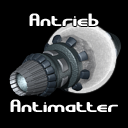
<style>
.page{position:relative;width:128px;height:128px;background:#000000}
.page>*{position:absolute;margin:0}
.t1{font:18px "GravitateBRK";color:#ffffff}
</style>
<div class="page">
<p class="t1" style="left:29px;top:13px;width:70px;height:13px">Antrieb</p>
<p class="t1" style="left:10px;top:99px;width:108px;height:13px">Antimatter</p>
</div>
